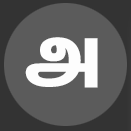
<style>
.page{position:relative;width:131px;height:131px;background:#5b5b5b}
.page>*{position:absolute;margin:0}
.t1{font:68.3px "NotoSansTamil-ExtraCondensedBlack";color:#fdfdfd;scale:1.15 1}
</style>
<div class="page">
<p class="t1" style="left:25px;top:37px;width:73px;height:51px">அ</p>
</div>
